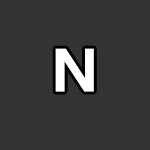
<style>
.page{position:relative;width:150px;height:150px;background:#333333}
.page>*{position:absolute;margin:0}
.t1{font:56px "MicrosoftYaHei-Bold";color:#ffffff}
</style>
<div class="page">
<p class="t1" style="left:55px;top:48px;width:39px;height:44px">N</p>
</div>
